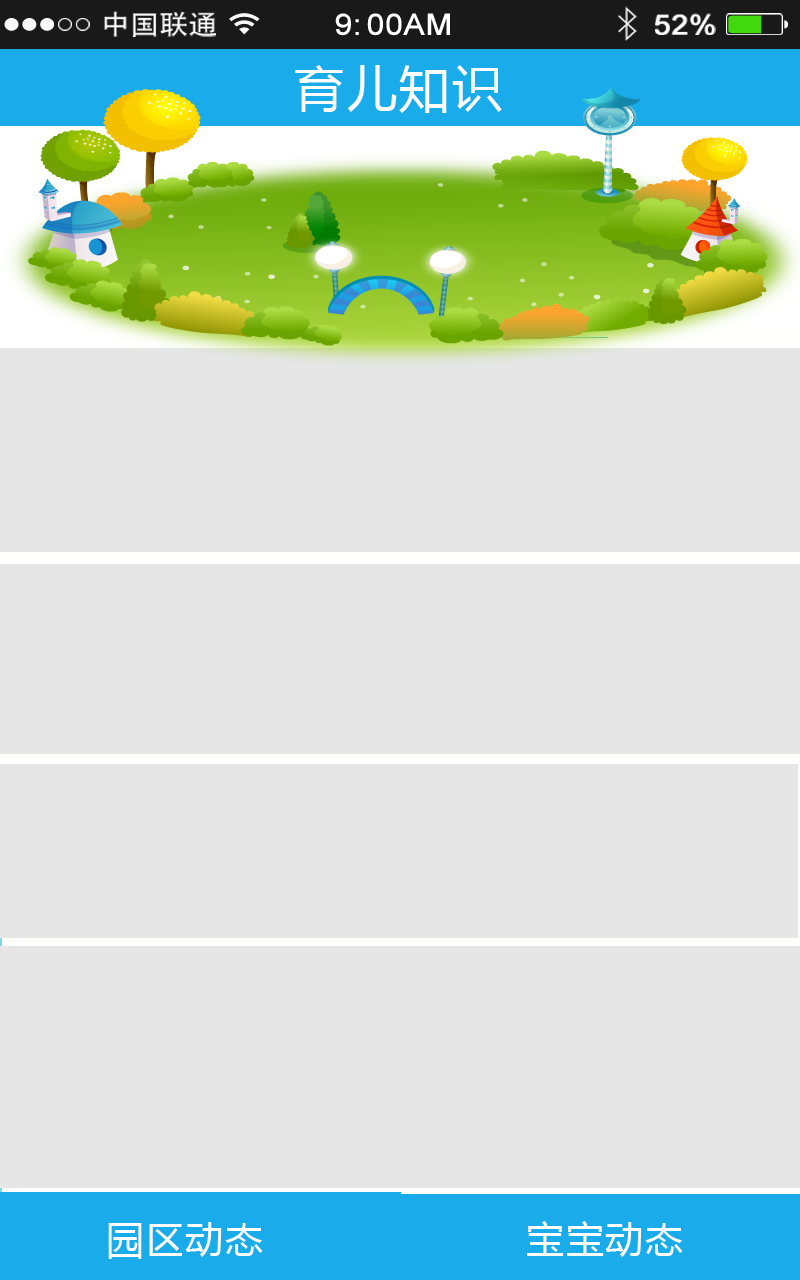
<style>
.page{position:relative;width:800px;height:1280px;background:#e6e6e7}
.page>*{position:absolute;margin:0}
.t1{font:26.8px "AdobeHeitiStd-Regular";color:#ffffff;scale:1.09 1}
.t2{font:29.2px "ArialMT";color:#ffffff;font-weight:bold;scale:1.09 1}
.t3{font:28px "ArialMT";color:#ffffff;font-weight:bold;scale:1.09 1}
.t4{font:50px "MicrosoftYaHei";letter-spacing:0.05em;color:#ffffff}
.t5{font:37.5px "MicrosoftYaHei";letter-spacing:0.05em;color:#fffffe}
</style>
<div class="page">
<p class="t1" style="left:104px;top:11px;width:112px;height:26px">中国联通</p>
<p class="t2" style="left:335px;top:13px;width:115px;height:23px">9:00AM</p>
<p class="t3" style="left:655px;top:13px;width:61px;height:22px">52%</p>
<p class="t4" style="left:295px;top:65px;width:207px;height:48px">育儿知识</p>
<p class="t5" style="left:108px;top:1222px;width:155px;height:37px">园区动态</p>
<p class="t5" style="left:527px;top:1221px;width:156px;height:36px">宝宝动态</p>
</div>
